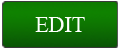
<style>
.page{position:relative;width:120px;height:50px}
.page>*{position:absolute;margin:0}
.t1{font:22px "TimesNewRomanPSMT";color:#ffffff}
</style>
<div class="page">
<p class="t1" style="left:35px;top:17px;width:50px;height:15px">EDIT</p>
</div>
